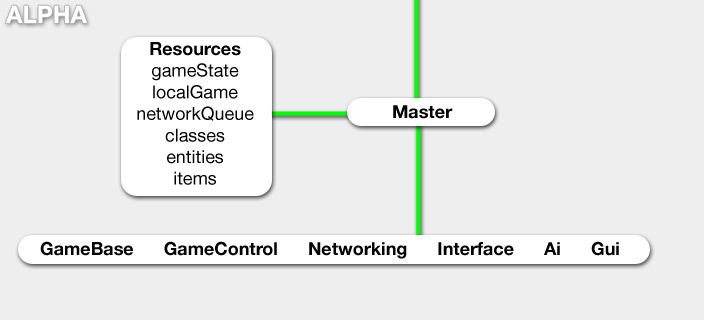
<style>
.page{position:relative;width:704px;height:320px;background:#eeeeee}
.page>*{position:absolute;margin:0}
.t1{font:24px "HelveticaNeue-Bold";color:#ffffff}
.t2{font:18px "HelveticaNeue";color:#000000}
.t3{font:18px "HelveticaNeue-Bold";color:#000000}
</style>
<div class="page">
<p class="t1" style="left:5px;top:5px;width:82px;height:18px">ALPHA</p>
<p class="t2" style="left:137px;top:42px;width:117px;height:143px;text-align:center"><span class="t3">Resources<br></span>gameState<br>localGame<br>networkQueue<br>classes<br>entities<br>items</p>
<p class="t3" style="left:393px;top:105px;width:60px;height:14px">Master</p>
<p class="t3" style="left:40px;top:241px;width:579px;height:18px">GameBase      GameControl      Networking      Interface      Ai      Gui</p>
</div>
